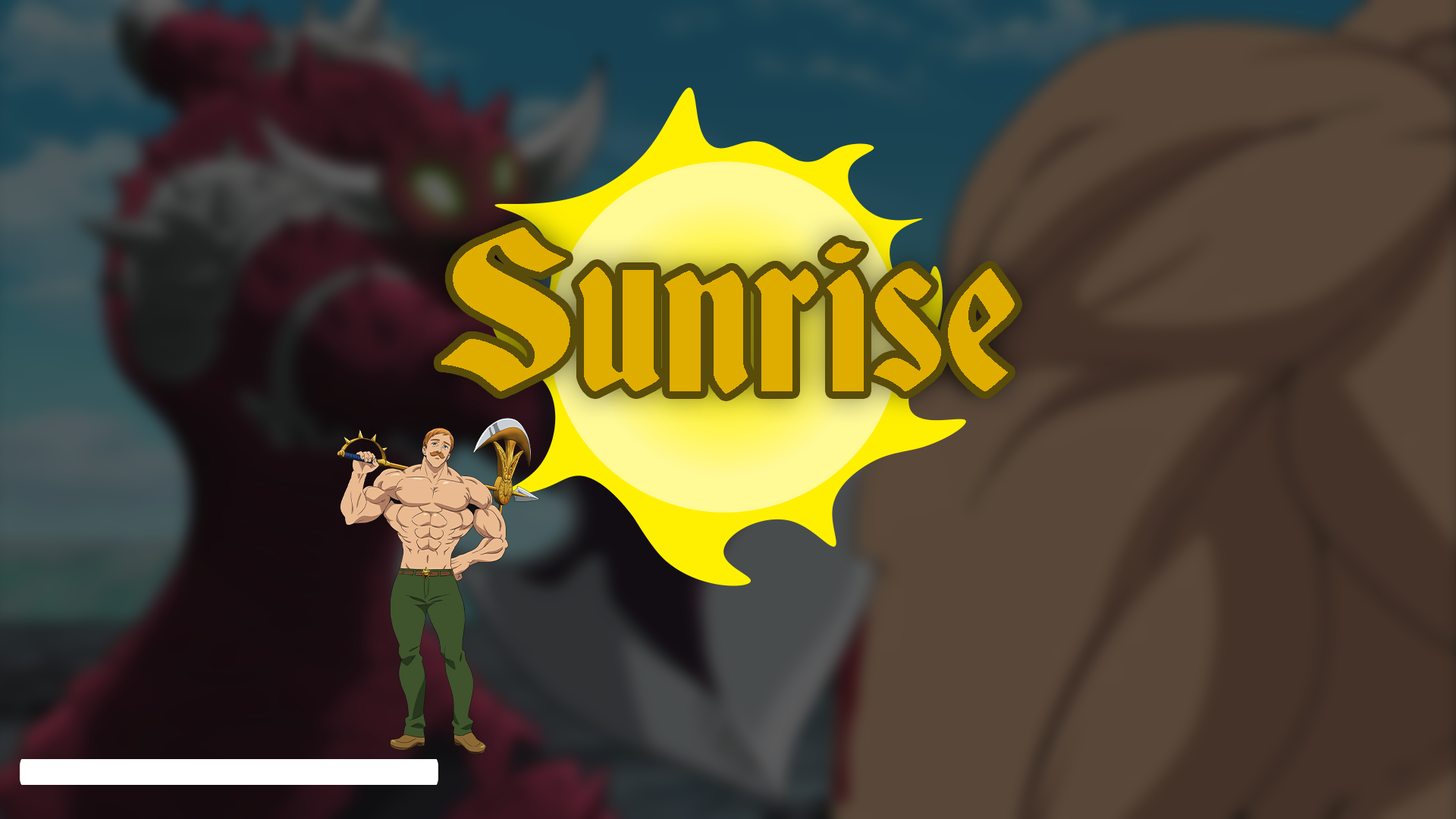
<style>
.page{position:relative;width:1456px;height:819px}
.page>*{position:absolute;margin:0}
.t1{font:210.1px "Deutsch-Gothic";color:#dfad00}
</style>
<div class="page">
<p class="t1" style="left:441px;top:227px;width:574px;height:167px">Sunrise</p>
</div>
